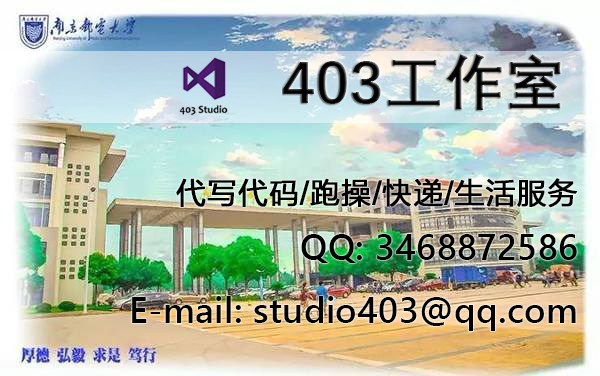
<style>
.page{position:relative;width:600px;height:376px}
.page>*{position:absolute;margin:0}
.t1{font:60px "DengXian-Bold";letter-spacing:0.01em;color:#010101}
.t2{font:36px "SegoeUI-Semibold";letter-spacing:0.01em;color:#010101}
.t3{font:30px "FZLTHK--GBK1-0";letter-spacing:0.01em;color:#010101;font-weight:bold}
</style>
<div class="page">
<p class="t1" style="left:283px;top:54px;width:278px;height:56px">403工作室</p>
<p class="t2" style="left:132px;top:178px;width:446px;height:153px;text-align:right"><span class="t3">代写代码/跑操/快递/生活服务<br></span>QQ: 3468872586<br>E-mail: studio403@qq.com</p>
</div>
